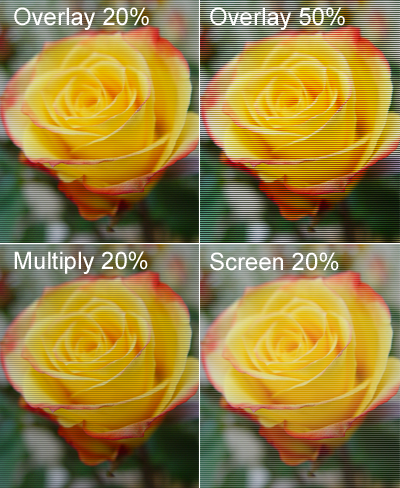
<style>
.page{position:relative;width:400px;height:488px}
.page>*{position:absolute;margin:0}
.t1{font:24px "ArialMT";color:#ffffff}
</style>
<div class="page">
<p class="t1" style="left:14px;top:7px;width:135px;height:23px">Overlay 20%</p>
<p class="t1" style="left:210px;top:7px;width:135px;height:23px">Overlay 50%</p>
<p class="t1" style="left:14px;top:251px;width:134px;height:23px">Multiply 20%</p>
<p class="t1" style="left:210px;top:252px;width:129px;height:19px">Screen 20%</p>
</div>
